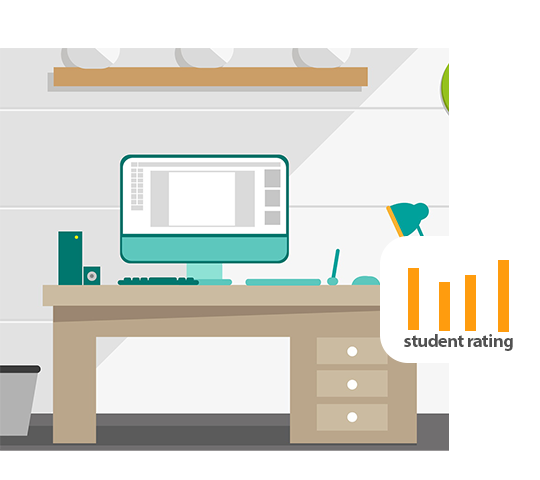
<style>
.page{position:relative;width:540px;height:480px;background:#ffffff}
.page>*{position:absolute;margin:0}
.t1{font:18.4px "MyriadPro-Bold";letter-spacing:-0.03em;color:#515151}
</style>
<div class="page">
<p class="t1" style="left:404px;top:334px;width:109px;height:17px">student rating</p>
</div>
